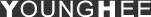
<style>
.page{position:relative;width:151px;height:17px;background:#333333}
.page>*{position:absolute;margin:0}
.t1{font:22.8px "ArialMT";letter-spacing:0.04em;color:#ffffff;scale:1.05 1}
.t2{font:22.8px "Arial-Black";letter-spacing:0.04em;color:#ffffff;scale:1.05 1}
.t3{font:22.8px "ArialMT";letter-spacing:0.1em;color:#ffffff;scale:1.05 1}
.t4{font:22.8px "Arial-Black";letter-spacing:0.1em;color:#ffffff;scale:1.05 1}
</style>
<div class="page">
<p class="t1" style="left:0px;top:0px;width:151px;height:18px"><span class="t2">Y</span>OUN<span class="t3">G</span><span class="t4">H</span>EE</p>
</div>
